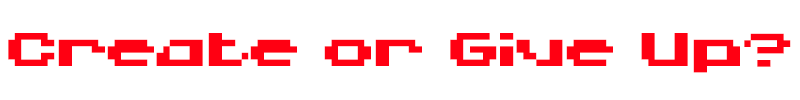
<style>
.page{position:relative;width:800px;height:100px;background:#ffffff}
.page>*{position:absolute;margin:0}
.t1{font:47px "SuperPixelsRegular";color:#ff0012}
</style>
<div class="page">
<p class="t1" style="left:8px;top:33px;width:783px;height:40px">Create or Give Up?</p>
</div>
